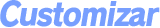
<style>
.page{position:relative;width:160px;height:28px;background:#ffffff}
.page>*{position:absolute;margin:0}
.t1{font:32px "RodinPro-EB";letter-spacing:-0.057em;color:#789ffe;font-style:italic;scale:0.92 1}
</style>
<div class="page">
<p class="t1" style="left:0px;top:0px;width:160px;height:27px">Customizar</p>
</div>
